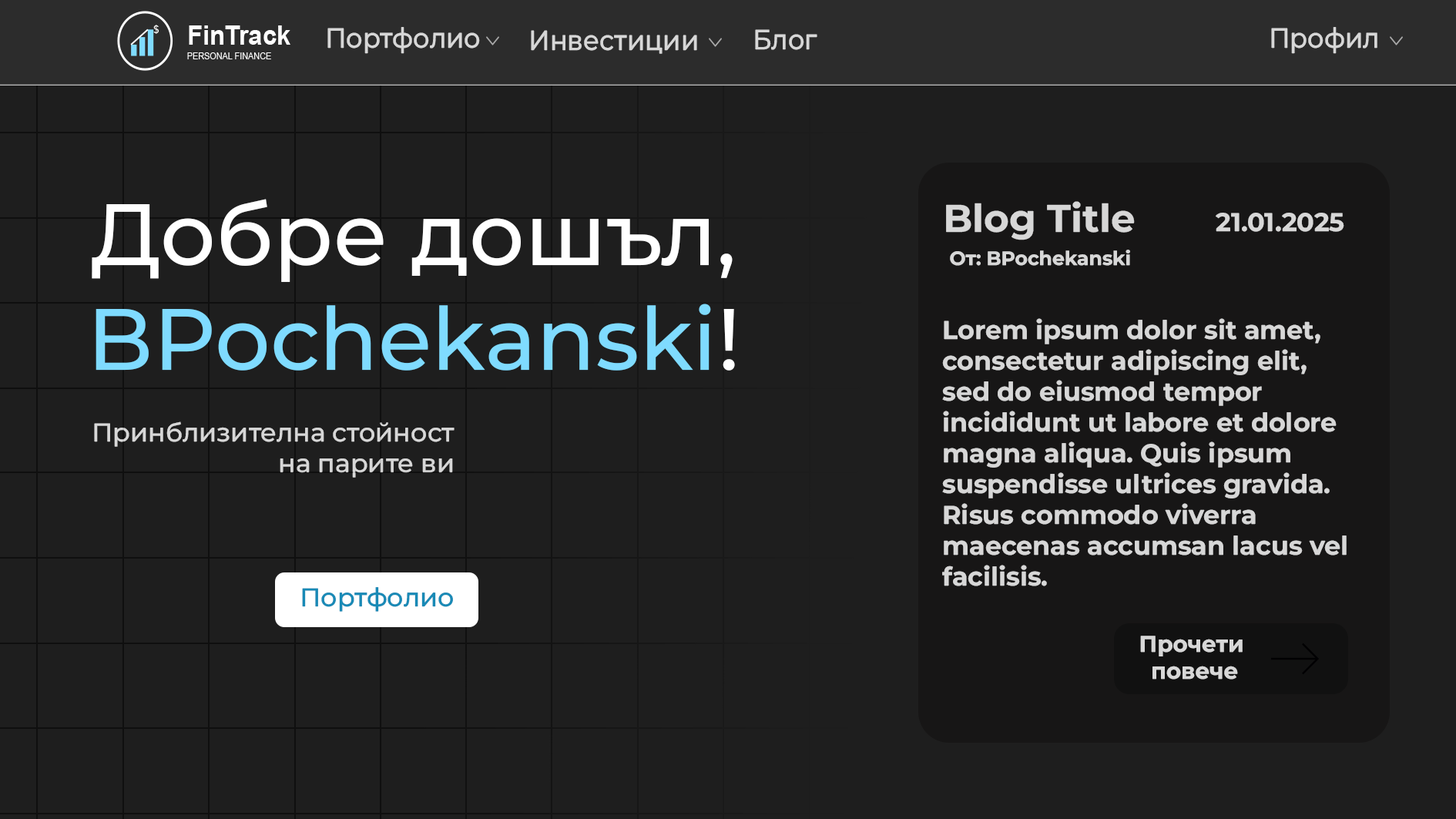
<style>
.page{position:relative;width:1456px;height:819px;background:#1e1e1e}
.page>*{position:absolute;margin:0}
.t1{font:27.8px "MontserratRoman-Medium";color:#d7d7d7;scale:0.93 1}
.t2{font:86.9px "MontserratRoman-Medium";color:#ffffff}
.t3{font:86.9px "MontserratRoman-Medium";color:#7fdbff}
.t4{font:38.5px "MontserratRoman-Bold";color:#d7d7d7}
.t5{font:25.7px "MontserratRoman-Bold";color:#d7d7d7}
.t6{font:19.3px "MontserratRoman-Bold";color:#d7d7d7}
.t7{font:25.7px "MontserratRoman-Medium";color:#d7d7d7}
.t8{font:25.7px "MontserratRoman-Medium";color:#188ab6}
.t9{font:22.5px "MontserratRoman-Bold";color:#d7d7d7}
</style>
<div class="page">
<p class="t1" style="left:327px;top:27px;width:153px;height:27px">Портфолио</p>
<p class="t1" style="left:755px;top:29px;width:62px;height:21px">Блог</p>
<p class="t1" style="left:1271px;top:27px;width:106px;height:27px">Профил</p>
<p class="t1" style="left:531px;top:30px;width:166px;height:24px">Инвестиции</p>
<p class="t2" style="left:92px;top:199px;width:643px;height:172px;text-align:center">Добре дошъл,<br><span class="t3">BPochekanski</span>!</p>
<p class="t4" style="left:946px;top:201px;width:189px;height:39px">Blog Title</p>
<p class="t5" style="left:1216px;top:213px;width:128px;height:19px">21.01.2025</p>
<p class="t6" style="left:950px;top:250px;width:180px;height:16px">От: BPochekanski</p>
<p class="t5" style="left:942px;top:318px;width:405px;height:268px">Lorem ipsum dolor sit amet, consectetur adipiscing elit, sed do eiusmod tempor incididunt ut labore et dolore magna aliqua. Quis ipsum suspendisse ultrices gravida. Risus commodo viverra maecenas accumsan lacus vel facilisis.</p>
<p class="t7" style="left:94px;top:421px;width:361px;height:57px;text-align:right">Принблизителна стойност<br>на парите ви</p>
<p class="t8" style="left:302px;top:587px;width:151px;height:25px">Портфолио</p>
<p class="t9" style="left:1140px;top:636px;width:103px;height:43px;text-align:center">Прочети <br>повече</p>
</div>
